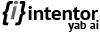
<style>
.page{position:relative;width:100px;height:32px;background:#ffffff}
.page>*{position:absolute;margin:0}
.t1{font:26px "PTSans-BoldItalic";color:#000000}
.t2{font:26px "PTSans-BoldItalic";color:#666666}
.t3{font:20.2px "PTSans-Bold";color:#000000}
.t4{font:12px "PTSans-Bold";color:#000000}
</style>
<div class="page">
<p class="t1" style="left:2px;top:0px;width:24px;height:26px">{<span class="t2">i</span>}</p>
<p class="t3" style="left:28px;top:6px;width:71px;height:14px">intentor</p>
<p class="t4" style="left:68px;top:20px;width:31px;height:12px">yab ai</p>
</div>
